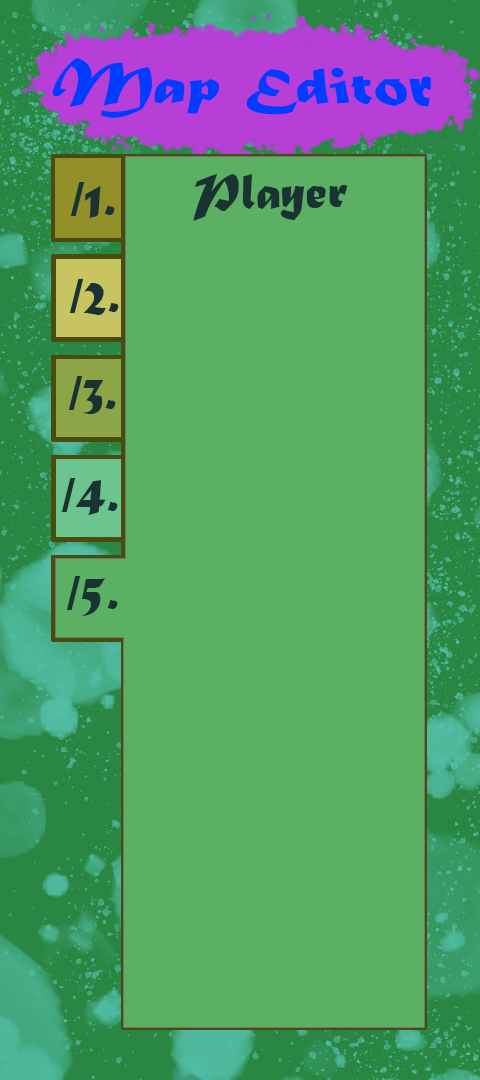
<style>
.page{position:relative;width:480px;height:1080px;background:#5cb064}
.page>*{position:absolute;margin:0}
.t1{font:52.3px "MaturaMTScriptCapitals";color:#183331}
</style>
<div class="page">
<p class="t1" style="left:193px;top:174px;width:155px;height:47px">Player</p>
<p class="t1" style="left:70px;top:182px;width:45px;height:36px">/1.</p>
<p class="t1" style="left:69px;top:279px;width:50px;height:36px">/2.</p>
<p class="t1" style="left:68px;top:376px;width:48px;height:38px">/3.</p>
<p class="t1" style="left:61px;top:478px;width:57px;height:37px">/4.</p>
<p class="t1" style="left:66px;top:576px;width:52px;height:40px">/5.</p>
</div>
